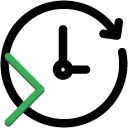
<style>
.page{position:relative;width:128px;height:128px;background:#ffffff}
.page>*{position:absolute;margin:0}
.t1{font:100px "NSimSun";color:#3aac59;font-weight:bold}
</style>
<div class="page">
<p class="t1" style="left:4px;top:53px;width:41px;height:72px">&gt;</p>
</div>
